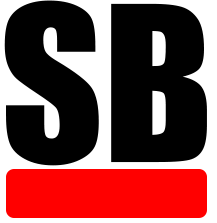
<style>
.page{position:relative;width:217px;height:223px;background:#000000}
.page>*{position:absolute;margin:0}
.t1{font:200px "Impact";color:#000000}
</style>
<div class="page">
<p class="t1" style="left:4px;top:0px;width:203px;height:166px;rotate:-90deg">SB</p>
</div>
